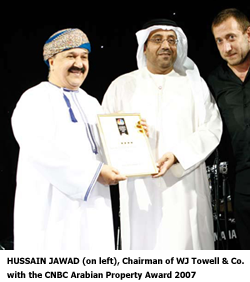
<style>
.page{position:relative;width:250px;height:282px;background:#ffffff}
.page>*{position:absolute;margin:0}
.t1{font:8.7px/13.9px "Tahoma-Bold";letter-spacing:0.005em;color:#000000;scale:0.95 1}
</style>
<div class="page">
<p class="t1" style="left:7px;top:257px;width:237px;height:23px">HUSSAIN JAWAD (on left), Chairman of WJ Towell &amp; Co.<br>with the CNBC Arabian Property Award 2007</p>
</div>
